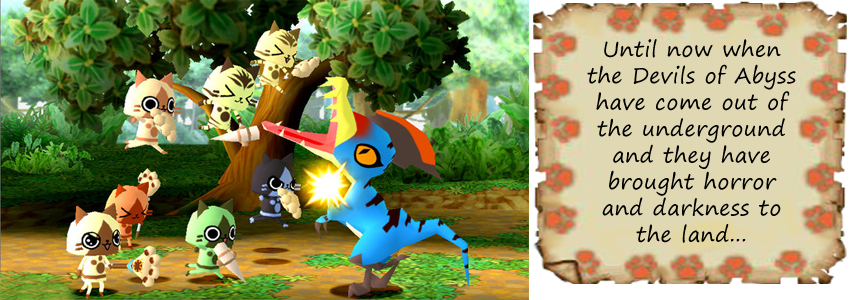
<style>
.page{position:relative;width:860px;height:300px}
.page>*{position:absolute;margin:0}
.t1{font:21.2px/26.5px "SegoePrint";letter-spacing:0.025em;color:#000000}
</style>
<div class="page">
<p class="t1" style="left:587px;top:39px;width:209px;height:204px;text-align:center">Until now when the Devils of Abyss have come out of the underground and they have <br>brought horror and darkness to the land...</p>
</div>
